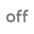
<style>
.page{position:relative;width:34px;height:34px;background:#ffffff}
.page>*{position:absolute;margin:0}
.t1{font:16px "Comfortaa-Bold";color:#7a7d80}
</style>
<div class="page">
<p class="t1" style="left:6px;top:9px;width:23px;height:14px">off</p>
</div>
